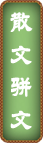
<style>
.page{position:relative;width:43px;height:143px}
.page>*{position:absolute;margin:0}
.t1{font:27.1px "STLiti";color:#ffffff;font-weight:bold;scale:0.85 1}
</style>
<div class="page">
<p class="t1" style="left:10px;top:12px;width:23px;height:118px">散<br>文<br>骈<br>文</p>
</div>
